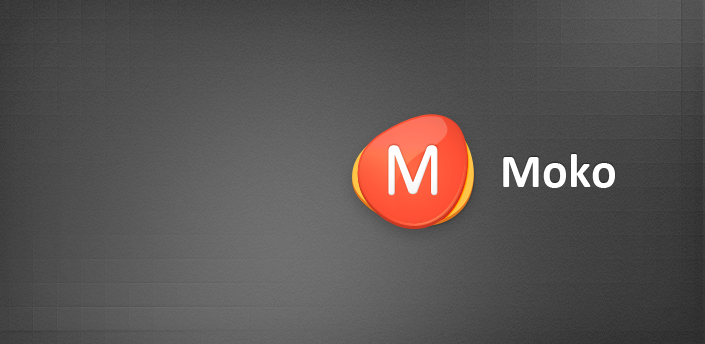
<style>
.page{position:relative;width:705px;height:344px}
.page>*{position:absolute;margin:0}
.t1{font:48px "Calibri-Bold";color:#ffffff}
</style>
<div class="page">
<p class="t1" style="left:503px;top:154px;width:112px;height:34px">Moko</p>
</div>
